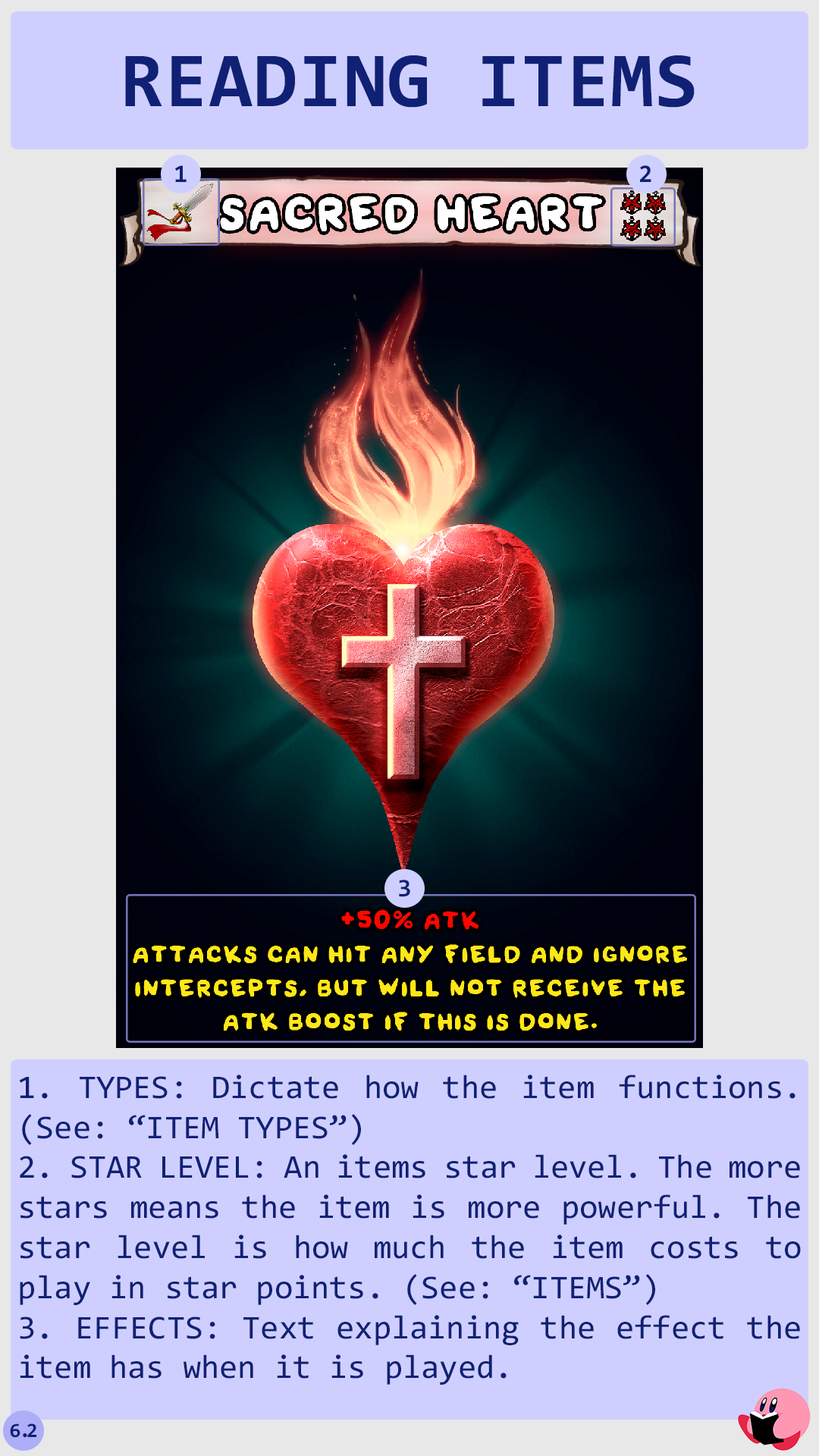
<style>
.page{position:relative;width:819px;height:1456px;background:#cfcfff}
.page>*{position:absolute;margin:0}
.t1{font:78.3px "Consolas-Bold";letter-spacing:0.02em;color:#102175}
.t2{font:25.5px "Consolas-Bold";color:#102175}
.t3{font:33.4px "Consolas";color:#102175}
.t4{font:20.5px "Consolas-Bold";letter-spacing:-0.06em;color:#102175}
.t5{font:20.5px "Consolas-Bold";letter-spacing:-0.22em;color:#102175}
</style>
<div class="page">
<p class="t1" style="left:125px;top:55px;width:570px;height:53px">READING ITEMS</p>
<p class="t2" style="left:175px;top:165px;width:12px;height:17px">1</p>
<p class="t2" style="left:640px;top:165px;width:11px;height:17px">2</p>
<p class="t2" style="left:399px;top:880px;width:11px;height:17px">3</p>
<p class="t3" style="left:19px;top:1075px;width:782px;height:310px;text-align:justify">1. TYPES: Dictate how the item functions. (See: “ITEM TYPES”)<br>2. STAR LEVEL: An items star level. The more stars means the item is more powerful. The star level is how much the item costs to play in star points. (See: “ITEMS”)<br>3. EFFECTS: Text explaining the effect the item has when it is played.</p>
<p class="t4" style="left:10px;top:1423px;width:26px;height:15px">6<span class="t5">.</span>2</p>
</div>
